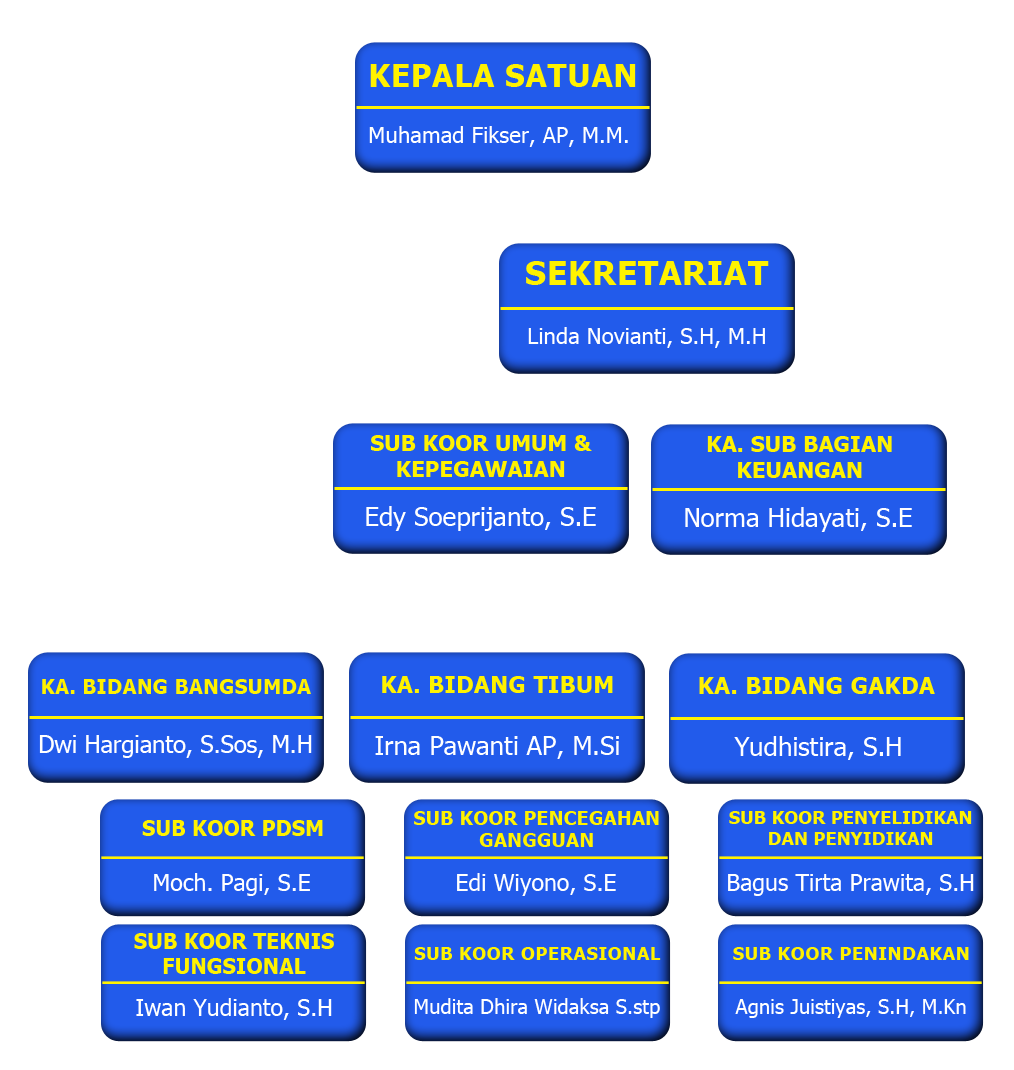
<style>
.page{position:relative;width:1014px;height:1070px;background:#ffffff}
.page>*{position:absolute;margin:0}
.t1{font:31.4px "Tahoma-Bold";letter-spacing:0.02em;color:#fff200}
.t2{font:22.2px "Tahoma";color:#ffffff}
.t3{font:33.3px "Tahoma-Bold";letter-spacing:0.02em;color:#fff200}
.t4{font:21.6px "Tahoma-Bold";letter-spacing:0.02em;color:#fff200}
.t5{font:25.9px "Tahoma";color:#ffffff}
.t6{font:23.1px "Tahoma-Bold";letter-spacing:0.02em;color:#fff200}
.t7{font:20.2px "Tahoma-Bold";letter-spacing:0.02em;color:#fff200}
.t8{font:23.5px "Tahoma";color:#ffffff}
.t9{font:25.8px "Tahoma";color:#ffffff}
.t10{font:20.7px "Tahoma-Bold";letter-spacing:0.02em;color:#fff200}
.t11{font:19.1px "Tahoma-Bold";letter-spacing:0.02em;color:#fff200}
.t12{font:17.7px "Tahoma-Bold";letter-spacing:0.02em;color:#fff200}
.t13{font:23.1px "Tahoma";color:#ffffff}
.t14{font:18.4px "Tahoma-Bold";letter-spacing:0.02em;color:#fff200}
.t15{font:20.4px "Tahoma";color:#ffffff}
</style>
<div class="page">
<p class="t1" style="left:370px;top:64px;width:266px;height:23px">KEPALA SATUAN</p>
<p class="t2" style="left:369px;top:126px;width:259px;height:21px">Muhamad Fikser, AP, M.M.</p>
<p class="t3" style="left:526px;top:261px;width:243px;height:24px">SEKRETARIAT</p>
<p class="t2" style="left:528px;top:327px;width:237px;height:21px">Linda Novianti, S.H, M.H</p>
<p class="t4" style="left:371px;top:435px;width:221px;height:42px;text-align:center">SUB KOOR UMUM &amp;<br>KEPEGAWAIAN</p>
<p class="t4" style="left:707px;top:436px;width:185px;height:42px;text-align:center">KA. SUB BAGIAN<br>KEUANGAN</p>
<p class="t5" style="left:366px;top:506px;width:230px;height:25px">Edy Soeprijanto, S.E</p>
<p class="t5" style="left:685px;top:507px;width:227px;height:25px">Norma Hidayati, S.E</p>
<p class="t6" style="left:382px;top:676px;width:231px;height:17px">KA. BIDANG TIBUM</p>
<p class="t6" style="left:699px;top:677px;width:236px;height:17px">KA. BIDANG GAKDA</p>
<p class="t7" style="left:42px;top:679px;width:269px;height:15px">KA. BIDANG BANGSUMDA</p>
<p class="t8" style="left:39px;top:735px;width:273px;height:23px">Dwi Hargianto, S.Sos, M.H</p>
<p class="t9" style="left:375px;top:736px;width:244px;height:23px">Irna Pawanti AP, M.Si</p>
<p class="t9" style="left:734px;top:736px;width:167px;height:24px">Yudhistira, S.H</p>
<p class="t10" style="left:142px;top:820px;width:181px;height:16px">SUB KOOR PDSM</p>
<p class="t11" style="left:414px;top:811px;width:245px;height:36px;text-align:center">SUB KOOR PENCEGAHAN<br>GANGGUAN</p>
<p class="t12" style="left:729px;top:811px;width:243px;height:34px;text-align:center">SUB KOOR PENYELIDIKAN<br>DAN PENYIDIKAN</p>
<p class="t13" style="left:154px;top:873px;width:156px;height:23px">Moch. Pagi, S.E</p>
<p class="t13" style="left:457px;top:873px;width:159px;height:23px">Edi Wiyono, S.E</p>
<p class="t13" style="left:728px;top:874px;width:246px;height:22px">Bagus Tirta Prawita, S.H</p>
<p class="t10" style="left:134px;top:933px;width:200px;height:41px;text-align:center">SUB KOOR TEKNIS<br>FUNGSIONAL</p>
<p class="t14" style="left:414px;top:947px;width:247px;height:13px">SUB KOOR OPERASIONAL</p>
<p class="t14" style="left:733px;top:947px;width:236px;height:13px">SUB KOOR PENINDAKAN</p>
<p class="t13" style="left:136px;top:998px;width:196px;height:22px">Iwan Yudianto, S.H</p>
<p class="t15" style="left:414px;top:998px;width:246px;height:20px">Mudita Dhira Widaksa S.stp</p>
<p class="t15" style="left:735px;top:999px;width:231px;height:19px">Agnis Juistiyas, S.H, M.Kn</p>
</div>
